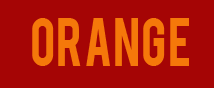
<style>
.page{position:relative;width:214px;height:88px;background:#a50505}
.page>*{position:absolute;margin:0}
.t1{font:53.6px "Bebas";color:#f5780a;scale:0.91 1}
</style>
<div class="page">
<p class="t1" style="left:32px;top:18px;width:157px;height:48px">orange</p>
</div>
